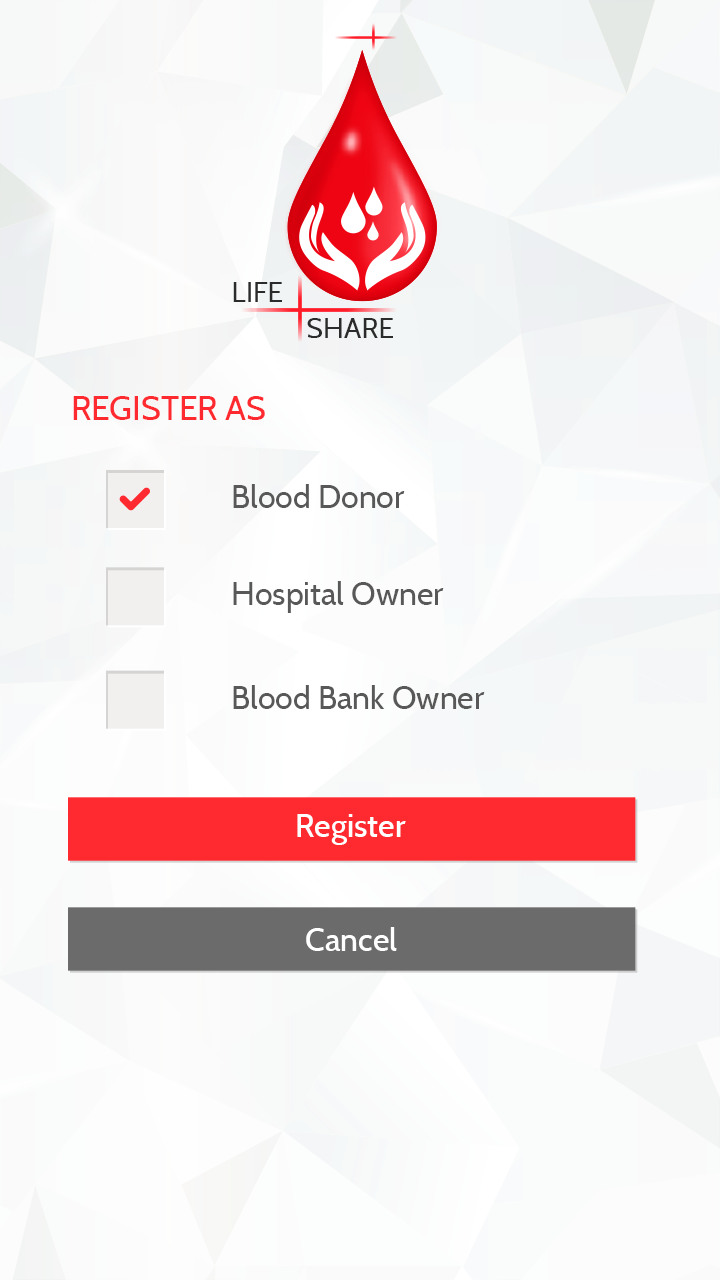
<style>
.page{position:relative;width:720px;height:1280px}
.page>*{position:absolute;margin:0}
.t1{font:28.3px "Cabin-Regular";color:#2b2b2b}
.t2{font:33.8px "Cabin-Regular";color:#ea393e}
.t3{font:32px "Cabin-Regular";color:#535353}
.t4{font:32px "Cabin-Medium";color:#ffffff}
</style>
<div class="page">
<p class="t1" style="left:233px;top:282px;width:49px;height:20px">LIFE</p>
<p class="t1" style="left:307px;top:318px;width:86px;height:20px">SHARE</p>
<p class="t2" style="left:73px;top:396px;width:192px;height:24px">REGISTER AS</p>
<p class="t3" style="left:233px;top:484px;width:172px;height:24px">Blood Donor</p>
<p class="t3" style="left:233px;top:581px;width:211px;height:32px">Hospital Owner</p>
<p class="t3" style="left:233px;top:685px;width:252px;height:24px">Blood Bank Owner</p>
<p class="t4" style="left:297px;top:814px;width:109px;height:31px">Register</p>
<p class="t4" style="left:306px;top:927px;width:91px;height:24px">Cancel</p>
</div>
